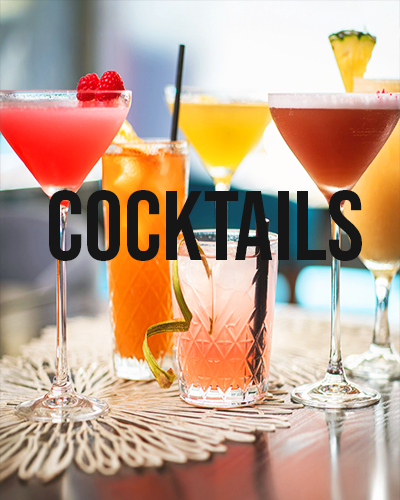
<style>
.page{position:relative;width:400px;height:500px}
.page>*{position:absolute;margin:0}
.t1{font:99px "BebasNeue-Regular";color:#171616}
</style>
<div class="page">
<p class="t1" style="left:49px;top:190px;width:313px;height:71px">COCKTAILS</p>
</div>
